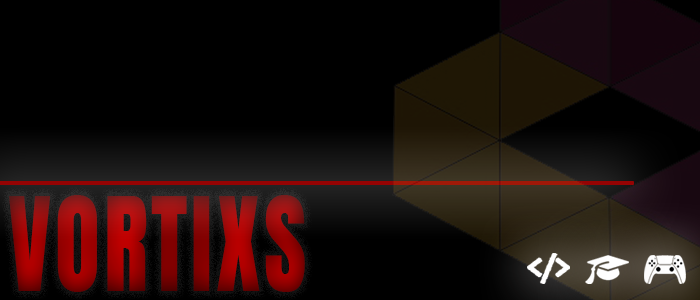
<style>
.page{position:relative;width:700px;height:300px;background:#000000}
.page>*{position:absolute;margin:0}
.t1{font:109.7px "Anton-Regular";letter-spacing:0.04em;scale:0.84 1}
</style>
<div class="page">
<p class="t1" style="left:9px;top:195px;width:296px;height:97px">VORTIXS</p>
</div>
